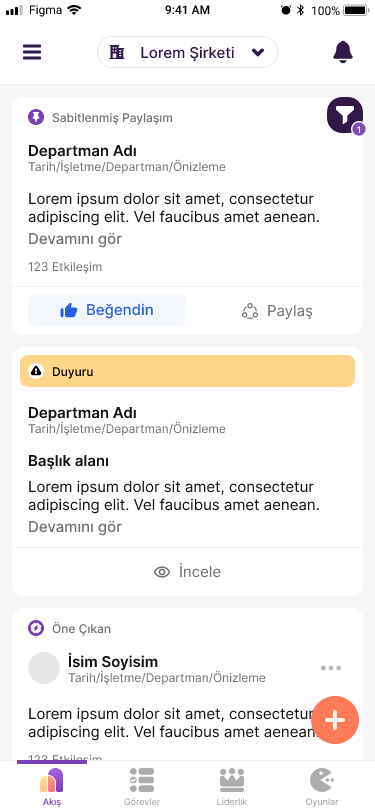
<style>
.page{position:relative;width:375px;height:812px;background:#ffffff}
.page>*{position:absolute;margin:0}
.t1{font:12px "SFProText-Regular";color:#000000}
.t2{font:12px "SFProText-Semibold";color:#000000}
.t3{font:15px "Inter-Medium";color:#301948}
.t4{font:12px "Inter-Medium";color:#707070}
.t5{font:9px "Inter-SemiBold";color:#ffffff}
.t6{font:15px "Inter-SemiBold";color:#111111}
.t7{font:12px "Inter-Regular";color:#707070}
.t8{font:15px "Inter-Regular";color:#111111}
.t9{font:15px "Inter-Medium";color:#707070}
.t10{font:15px "Inter-Medium";color:#2860e1}
.t11{font:15px "Inter-Regular";color:#707070}
.t12{font:12px "Inter-Medium";color:#000000}
.t13{font:12px "Inter-Regular"}
.t14{font:9px "Inter-Medium";color:#793fb5}
.t15{font:9px "Inter-Regular";color:#989898}
</style>
<div class="page">
<p class="t1" style="left:29px;top:5px;width:33px;height:12px">Figma</p>
<p class="t2" style="left:165px;top:5px;width:45px;height:10px">9:41 AM</p>
<p class="t1" style="left:311px;top:6px;width:29px;height:10px">100%</p>
<p class="t3" style="left:141px;top:46px;width:93px;height:16px">Lorem Şirketi</p>
<p class="t4" style="left:52px;top:112px;width:121px;height:13px">Sabitlenmiş Paylaşım</p>
<p class="t5" style="left:357px;top:126px;width:4px;height:7px">1</p>
<p class="t6" style="left:29px;top:145px;width:107px;height:15px">Departman Adı</p>
<p class="t7" style="left:28px;top:159px;width:198px;height:15px">Tarih/İşletme/Departman/Önizleme</p>
<p class="t8" style="left:28px;top:192px;width:291px;height:34px">Lorem ipsum dolor sit amet, consectetur adipiscing elit. Vel faucibus amet aenean.</p>
<p class="t9" style="left:29px;top:232px;width:93px;height:16px">Devamını gör</p>
<p class="t7" style="left:28px;top:262px;width:74px;height:12px">123 Etkileşim</p>
<p class="t10" style="left:87px;top:303px;width:66px;height:16px">Beğendin</p>
<p class="t11" style="left:268px;top:305px;width:45px;height:15px">Paylaş</p>
<p class="t12" style="left:52px;top:367px;width:41px;height:12px">Duyuru</p>
<p class="t6" style="left:29px;top:407px;width:107px;height:15px">Departman Adı</p>
<p class="t7" style="left:28px;top:421px;width:198px;height:15px">Tarih/İşletme/Departman/Önizleme</p>
<p class="t6" style="left:29px;top:455px;width:80px;height:15px">Başlık alanı</p>
<p class="t8" style="left:28px;top:480px;width:291px;height:34px">Lorem ipsum dolor sit amet, consectetur adipiscing elit. Vel faucibus amet aenean.</p>
<p class="t9" style="left:29px;top:520px;width:93px;height:16px">Devamını gör</p>
<p class="t11" style="left:180px;top:563px;width:41px;height:15px">İncele</p>
<p class="t4" style="left:52px;top:621px;width:59px;height:15px">Öne Çıkan</p>
<p class="t6" style="left:68px;top:652px;width:90px;height:19px">İsim Soyisim</p>
<p class="t7" style="left:68px;top:670px;width:198px;height:15px">Tarih/İşletme/Departman/Önizleme</p>
<p class="t8" style="left:28px;top:707px;width:291px;height:34px">Lorem ipsum dolor sit amet, consectetur adipiscing elit. Vel faucibus amet aenean.</p>
<p class="t13" style="left:28px;top:755px;width:74px;height:12px">123 Etkileşim</p>
<p class="t14" style="left:43px;top:798px;width:18px;height:9px">Akış</p>
<p class="t15" style="left:124px;top:798px;width:36px;height:8px">Görevler</p>
<p class="t15" style="left:217px;top:798px;width:31px;height:8px">Liderlik</p>
<p class="t15" style="left:306px;top:798px;width:33px;height:9px">Oyunlar</p>
</div>
